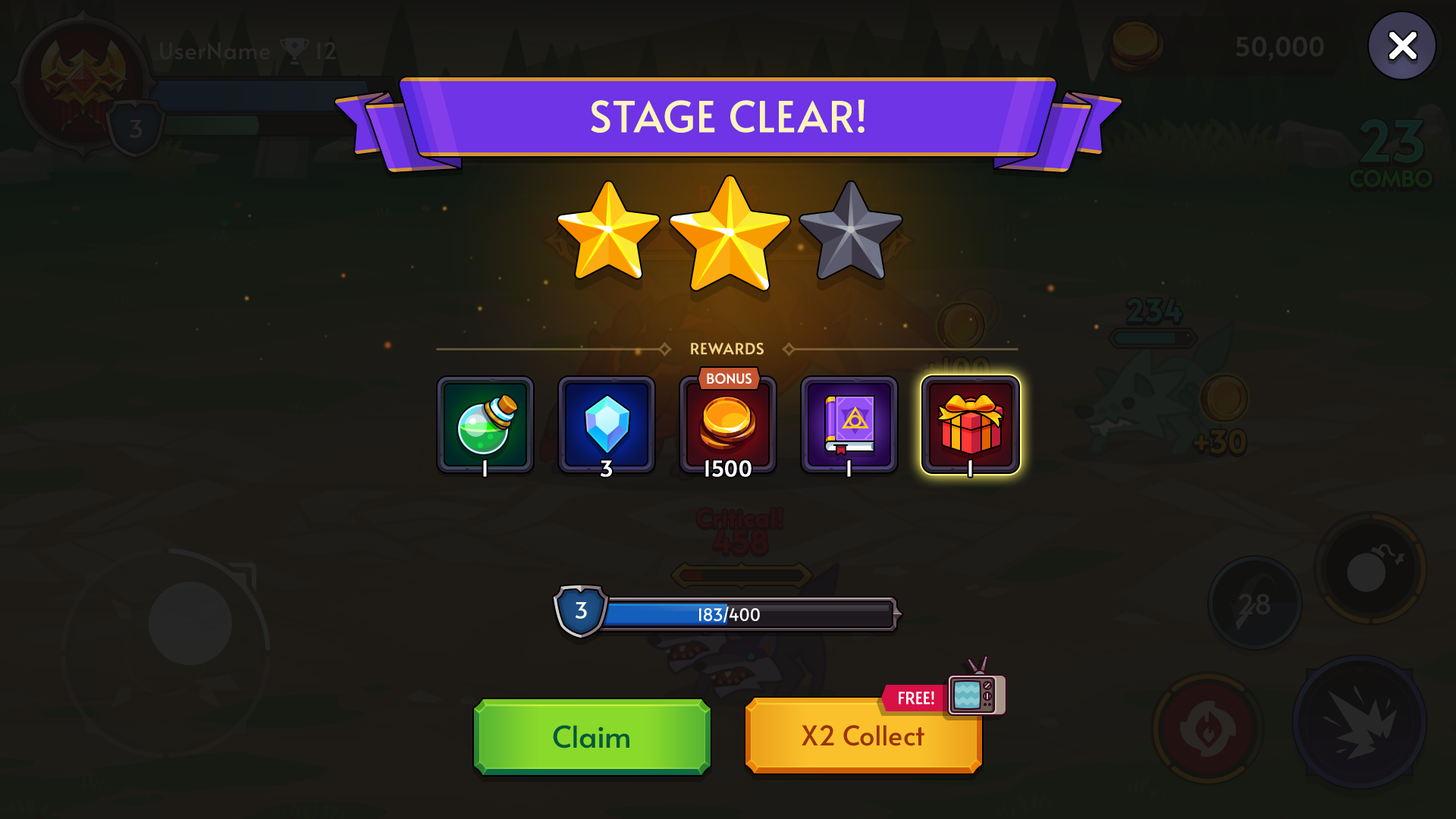
<style>
.page{position:relative;width:1456px;height:819px}
.page>*{position:absolute;margin:0}
.t1{font:42.5px "Alata-Regular";color:#fbf4bd;text-transform:uppercase;font-weight:bold}
.t2{font:15.2px "Alata-Regular";color:#f4d487;text-transform:uppercase;font-weight:bold}
.t3{font:13.6px "Alata-Regular";color:#ffffff;text-transform:uppercase}
.t4{font:21.2px "Alata-Regular";letter-spacing:0.02em;color:#ffffff;font-weight:bold}
.t5{font:22.1px "Alata-Regular";color:#fbfde7}
.t6{font:16.7px "Alata-Regular";color:#ffffff}
.t7{font:16.7px "Alata-Regular";color:#ffffff;text-transform:uppercase}
.t8{font:30.3px "Alata-Regular";color:#045a39}
.t9{font:27.3px "Alata-Regular";color:#973504}
</style>
<div class="page">
<p class="t1" style="left:591px;top:99px;width:273px;height:34px">Stage clear!</p>
<p class="t2" style="left:691px;top:343px;width:73px;height:12px">Rewards</p>
<p class="t3" style="left:707px;top:373px;width:44px;height:11px">Bonus</p>
<p class="t4" style="left:483px;top:460px;width:4px;height:17px">1</p>
<p class="t4" style="left:601px;top:460px;width:11px;height:17px">3</p>
<p class="t4" style="left:705px;top:460px;width:46px;height:17px">1500</p>
<p class="t4" style="left:847px;top:460px;width:4px;height:17px">1</p>
<p class="t4" style="left:968px;top:460px;width:4px;height:17px">1</p>
<p class="t5" style="left:575px;top:602px;width:12px;height:17px">3</p>
<p class="t6" style="left:699px;top:607px;width:61px;height:16px">183/400</p>
<p class="t7" style="left:899px;top:691px;width:35px;height:13px">Free!</p>
<p class="t8" style="left:553px;top:725px;width:76px;height:23px">Claim</p>
<p class="t9" style="left:802px;top:725px;width:122px;height:21px">X2 Collect</p>
</div>
